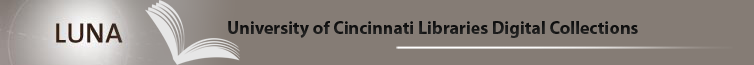
<style>
.page{position:relative;width:754px;height:65px;background:#857c75}
.page>*{position:absolute;margin:0}
.t1{font:18px "MyriadPro-Bold";color:#171717}
</style>
<div class="page">
<p class="t1" style="left:228px;top:21px;width:410px;height:17px">University of Cincinnati Libraries Digital Collections</p>
</div>
